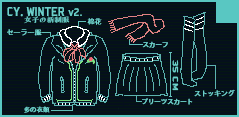
<style>
.page{position:relative;width:239px;height:117px;background:#050f1c}
.page>*{position:absolute;margin:0}
.t1{font:14.1px "Bombardier";color:#6cd1cb}
.t2{font:14.1px "AdobeHeitiStd-Regular";color:#6cd1cb}
.t3{font:12px "Bombardier";color:#6cd1cb}
.t4{font:6.7px "FZFENGRSTS-EB--GB1-0";color:#6cd1cb;scale:1.13 1}
.t5{font:7px "AdobeHeitiStd-Regular";color:#6cd1cb}
.t6{font:6.5px "AdobeHeitiStd-Regular";color:#6cd1cb}
.t7{font:8.3px "Bombardier";color:#6cd1cb;scale:1.65 1}
.t8{font:6.7px "AdobeHeitiStd-Regular";color:#6cd1cb}
</style>
<div class="page">
<p class="t1" style="left:7px;top:7px;width:75px;height:10px">CY<span class="t2">. </span>WINTER <span class="t3">v2.</span></p>
<p class="t4" style="left:24px;top:16px;width:46px;height:8px">女子の新制服</p>
<p class="t5" style="left:7px;top:29px;width:35px;height:7px">セーラー服</p>
<p class="t5" style="left:87px;top:18px;width:15px;height:7px">棉花</p>
<p class="t6" style="left:142px;top:41px;width:26px;height:7px">スカーフ</p>
<p class="t7" style="left:172px;top:60px;width:7px;height:31px;rotate:90deg">35 CM</p>
<p class="t8" style="left:194px;top:89px;width:41px;height:8px">ストッキング</p>
<p class="t6" style="left:142px;top:98px;width:51px;height:7px">プリーツスカート</p>
<p class="t6" style="left:24px;top:106px;width:26px;height:7px">多の衣類</p>
</div>
